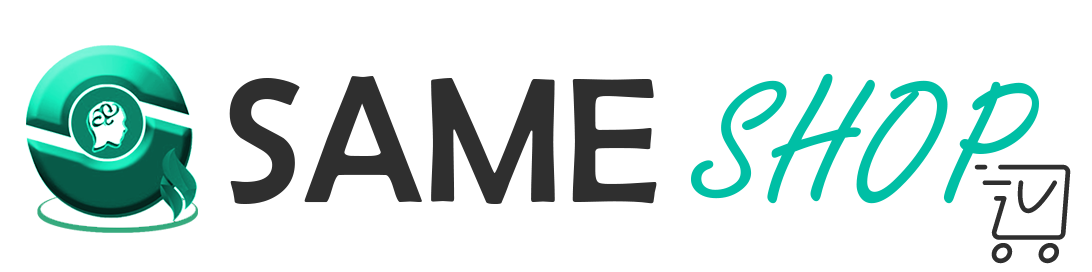
<style>
.page{position:relative;width:1092px;height:272px;background:#ffffff}
.page>*{position:absolute;margin:0}
.t1{font:180px "BerlinSansFB-Reg";color:#2f2f2f}
.t2{font:180px "FreestyleScript-Regular";color:#00bfa5;font-weight:bold}
</style>
<div class="page">
<p class="t1" style="left:229px;top:76px;width:428px;height:128px">SAME</p>
<p class="t2" style="left:691px;top:73px;width:348px;height:131px">SHOP</p>
</div>
